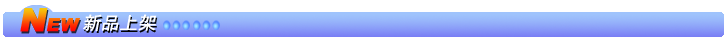
<style>
.page{position:relative;width:724px;height:42px;background:#ffffff}
.page>*{position:absolute;margin:0}
.t1{font:18px "Arial-Black";font-variant:small-caps;font-weight:bold;font-style:italic}
.t2{font:32px "Arial-Black";font-variant:small-caps;font-weight:bold;font-style:italic}
.t3{font:18px "SimHei";color:#ffffff;font-variant:small-caps;font-weight:bold;font-style:italic}
</style>
<div class="page">
<p class="t1" style="left:20px;top:8px;width:60px;height:24px"><span class="t2">N</span>EW</p>
<p class="t3" style="left:83px;top:14px;width:74px;height:17px">新品上架</p>
</div>
